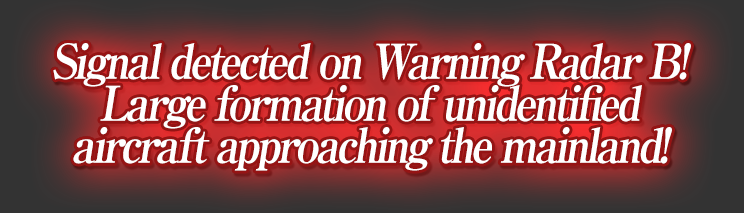
<style>
.page{position:relative;width:744px;height:213px}
.page>*{position:absolute;margin:0}
.t1{font:48px/42px "RyuminPro-ExBold";letter-spacing:-0.08em;color:#ffffff;font-style:italic;scale:0.9 1}
</style>
<div class="page">
<p class="t1" style="left:53px;top:43px;width:638px;height:128px;text-align:center">Signal detected on Warning Radar B!<br>Large formation of unidentified<br>aircraft approaching the mainland!</p>
</div>
